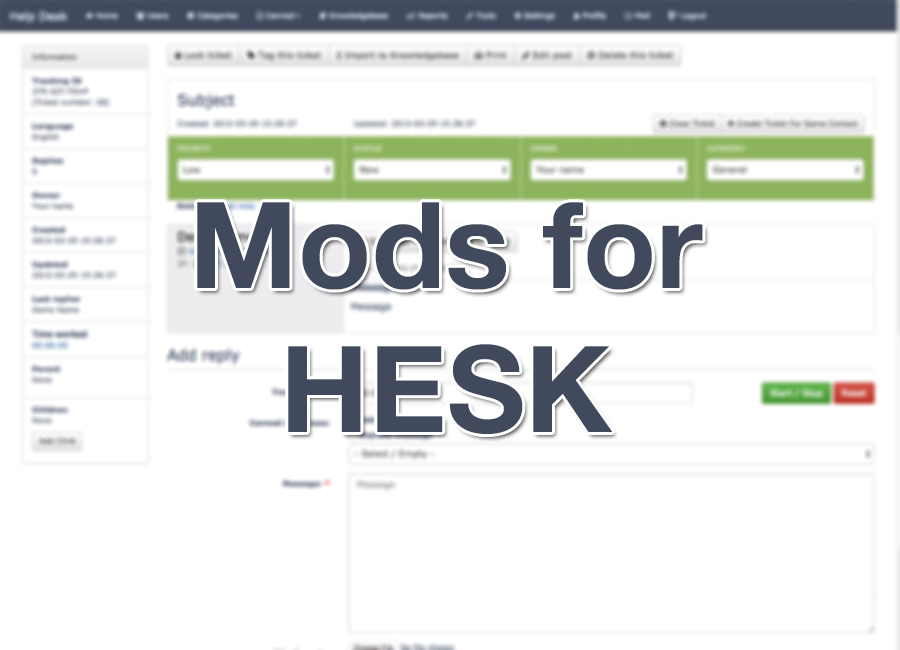
<style>
.page{position:relative;width:900px;height:650px;background:#ffffff}
.page>*{position:absolute;margin:0}
.t1{font:120px "HelveticaNeue-Bold";color:#414a5c}
</style>
<div class="page">
<p class="t1" style="left:197px;top:202px;width:506px;height:232px;text-align:center">Mods for<br>HESK</p>
</div>
